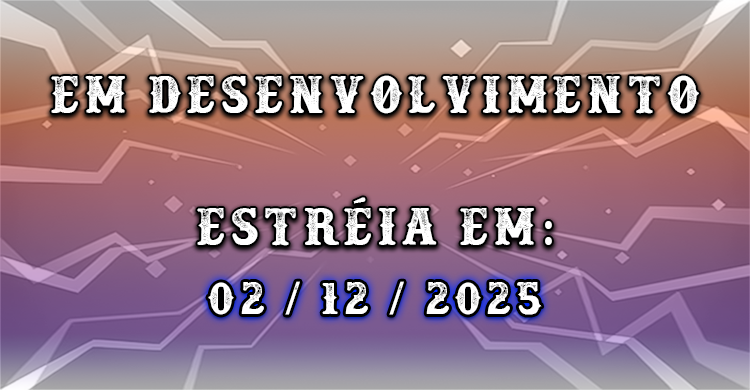
<style>
.page{position:relative;width:750px;height:390px}
.page>*{position:absolute;margin:0}
.t1{font:58.8px "Docktrin";letter-spacing:0.1em;color:#ffffff}
.t2{font:49.5px "Docktrin";letter-spacing:0.1em;color:#ffffff;scale:0.96 1}
</style>
<div class="page">
<p class="t1" style="left:51px;top:75px;width:648px;height:39px">EM DESENVOLVIMENTO</p>
<p class="t1" style="left:197px;top:197px;width:355px;height:49px">Estréia em:</p>
<p class="t2" style="left:208px;top:281px;width:334px;height:34px">02 / 12 / 2025</p>
</div>
